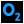
<style>
.page{position:relative;width:24px;height:24px;background:#000000}
.page>*{position:absolute;margin:0}
.t1{font:17.9px "Montserrat-Bold";color:#249cfc;scale:0.85 1}
.t2{font:11.2px "Montserrat-Bold";color:#249cfc;scale:0.85 1}
</style>
<div class="page">
<p class="t1" style="left:3px;top:3px;width:12px;height:13px">O</p>
<p class="t2" style="left:15px;top:12px;width:6px;height:9px">2</p>
</div>
